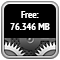
<style>
.page{position:relative;width:60px;height:60px;background:#000000}
.page>*{position:absolute;margin:0}
.t1{font:10px "PTSans-NarrowBold";color:#ffffff}
</style>
<div class="page">
<p class="t1" style="left:10px;top:11px;width:40px;height:19px;text-align:center">Free:<br>76.346 MB</p>
</div>
